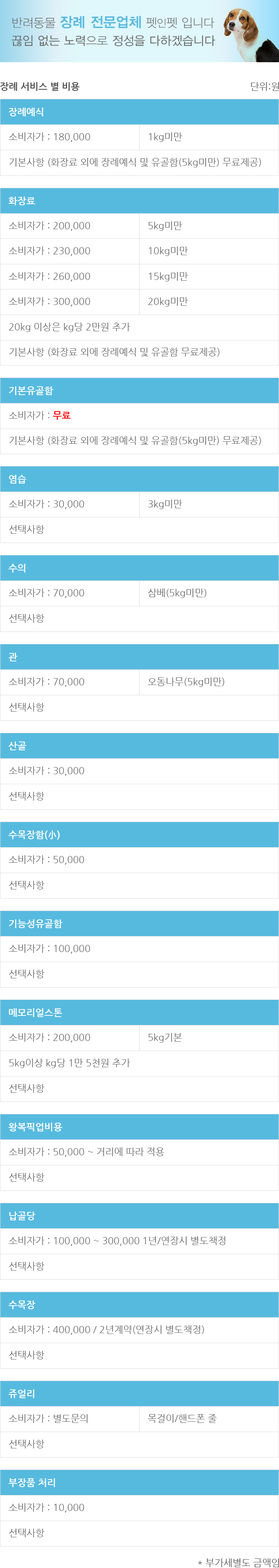
<style>
.page{position:relative;width:279px;height:1568px;background:#ffffff}
.page>*{position:absolute;margin:0}
.t1{font:12px/17.9px "YDVYGO32";color:#666666}
.t2{font:12px/17.9px "YDVYGO31";color:#666666}
.t3{font:14px/17.9px "YDVYGO34";color:#56badf}
.t4{font:10.4px/17.9px "YDVYGO31";color:#666666}
.t5{font:9.6px "NanumGothicBold";color:#4c4c4c}
.t6{font:9.6px "NanumGothic";color:#555555}
.t7{font:9.6px "NanumGothicBold";color:#ffffff}
.t8{font:9.6px "NanumGothic";color:#666666}
.t9{font:9.6px "NanumGothicBold";color:#ff0000}
</style>
<div class="page">
<p class="t1" style="left:12px;top:16px;width:203px;height:30px"><span class="t2">반려동물 </span><span class="t3">장례 전문업체</span><span class="t2"> 펫</span><span class="t4">인</span><span class="t2">펫 입니다<br></span>끊임 없는 노력<span class="t2">으로</span> 정성을 다하겠습니다</p>
<p class="t5" style="left:0px;top:82px;width:80px;height:9px">장례 서비스 별 비용</p>
<p class="t6" style="left:251px;top:82px;width:28px;height:9px">단위:원</p>
<p class="t7" style="left:9px;top:108px;width:34px;height:8px">장례예식</p>
<p class="t8" style="left:9px;top:132px;width:81px;height:10px">소비자가 : 180,000</p>
<p class="t8" style="left:149px;top:132px;width:33px;height:10px">1kg미만</p>
<p class="t8" style="left:9px;top:158px;width:252px;height:9px">기본사항 (화장료 외에 장례예식 및 유골함(5kg미만) 무료제공)</p>
<p class="t7" style="left:8px;top:197px;width:27px;height:8px">화장료</p>
<p class="t8" style="left:9px;top:221px;width:81px;height:10px">소비자가 : 200,000</p>
<p class="t8" style="left:148px;top:221px;width:34px;height:10px">5kg미만</p>
<p class="t8" style="left:9px;top:246px;width:81px;height:10px">소비자가 : 230,000</p>
<p class="t8" style="left:149px;top:246px;width:39px;height:10px">10kg미만</p>
<p class="t8" style="left:9px;top:272px;width:81px;height:9px">소비자가 : 260,000</p>
<p class="t8" style="left:149px;top:272px;width:39px;height:9px">15kg미만</p>
<p class="t8" style="left:9px;top:297px;width:81px;height:10px">소비자가 : 300,000</p>
<p class="t8" style="left:148px;top:297px;width:40px;height:10px">20kg미만</p>
<p class="t8" style="left:9px;top:323px;width:121px;height:9px">20kg 이상은 kg당 2만원 추가</p>
<p class="t8" style="left:9px;top:348px;width:211px;height:9px">기본사항 (화장료 외에 장례예식 및 유골함 무료제공)</p>
<p class="t7" style="left:9px;top:386px;width:44px;height:9px">기본유골함</p>
<p class="t8" style="left:9px;top:411px;width:62px;height:9px">소비자가 : <span class="t9">무료</span></p>
<p class="t8" style="left:9px;top:436px;width:252px;height:10px">기본사항 (화장료 외에 장례예식 및 유골함(5kg미만) 무료제공)</p>
<p class="t7" style="left:9px;top:475px;width:17px;height:9px">염습</p>
<p class="t8" style="left:9px;top:500px;width:75px;height:9px">소비자가 : 30,000</p>
<p class="t8" style="left:148px;top:500px;width:34px;height:9px">3kg미만</p>
<p class="t8" style="left:9px;top:525px;width:36px;height:9px">선택사항</p>
<p class="t7" style="left:8px;top:564px;width:18px;height:9px">수의</p>
<p class="t8" style="left:9px;top:588px;width:75px;height:10px">소비자가 : 70,000</p>
<p class="t8" style="left:148px;top:588px;width:59px;height:10px">삼베(5kg미만)</p>
<p class="t8" style="left:9px;top:614px;width:36px;height:9px">선택사항</p>
<p class="t7" style="left:8px;top:653px;width:10px;height:8px">관</p>
<p class="t8" style="left:9px;top:677px;width:75px;height:10px">소비자가 : 70,000</p>
<p class="t8" style="left:148px;top:677px;width:76px;height:10px">오동나무(5kg미만)</p>
<p class="t8" style="left:9px;top:703px;width:36px;height:9px">선택사항</p>
<p class="t7" style="left:8px;top:742px;width:18px;height:8px">산골</p>
<p class="t8" style="left:9px;top:766px;width:75px;height:10px">소비자가 : 30,000</p>
<p class="t8" style="left:9px;top:792px;width:36px;height:9px">선택사항</p>
<p class="t7" style="left:8px;top:830px;width:52px;height:10px">수목장함(小)</p>
<p class="t8" style="left:9px;top:855px;width:75px;height:10px">소비자가 : 50,000</p>
<p class="t8" style="left:9px;top:881px;width:36px;height:8px">선택사항</p>
<p class="t7" style="left:9px;top:919px;width:54px;height:9px">기능성유골함</p>
<p class="t8" style="left:9px;top:944px;width:81px;height:10px">소비자가 : 100,000</p>
<p class="t8" style="left:9px;top:970px;width:36px;height:8px">선택사항</p>
<p class="t7" style="left:9px;top:1008px;width:53px;height:9px">메모리얼스톤</p>
<p class="t8" style="left:9px;top:1033px;width:81px;height:10px">소비자가 : 200,000</p>
<p class="t8" style="left:148px;top:1033px;width:34px;height:10px">5kg기본</p>
<p class="t8" style="left:9px;top:1058px;width:121px;height:10px">5kg이상 kg당 1만 5천원 추가</p>
<p class="t8" style="left:9px;top:1084px;width:36px;height:9px">선택사항</p>
<p class="t7" style="left:8px;top:1123px;width:55px;height:8px">왕복픽업비용</p>
<p class="t8" style="left:9px;top:1147px;width:155px;height:10px">소비자가 : 50,000 ~ 거리에 따라 적용</p>
<p class="t8" style="left:9px;top:1173px;width:36px;height:9px">선택사항</p>
<p class="t7" style="left:9px;top:1212px;width:26px;height:8px">납골당</p>
<p class="t8" style="left:9px;top:1236px;width:216px;height:10px">소비자가 : 100,000 ~ 300,000 1년/연장시 별도책정</p>
<p class="t8" style="left:9px;top:1262px;width:36px;height:9px">선택사항</p>
<p class="t7" style="left:8px;top:1300px;width:27px;height:9px">수목장</p>
<p class="t8" style="left:9px;top:1325px;width:195px;height:10px">소비자가 : 400,000 / 2년계약(연장시 별도책정)</p>
<p class="t8" style="left:9px;top:1351px;width:36px;height:8px">선택사항</p>
<p class="t7" style="left:8px;top:1389px;width:26px;height:9px">쥬얼리</p>
<p class="t8" style="left:9px;top:1414px;width:79px;height:9px">소비자가 : 별도문의</p>
<p class="t8" style="left:148px;top:1414px;width:69px;height:9px">목걸이/핸드폰 줄</p>
<p class="t8" style="left:9px;top:1440px;width:36px;height:8px">선택사항</p>
<p class="t7" style="left:8px;top:1478px;width:47px;height:9px">부장품 처리</p>
<p class="t8" style="left:9px;top:1503px;width:75px;height:10px">소비자가 : 10,000</p>
<p class="t8" style="left:9px;top:1529px;width:36px;height:8px">선택사항</p>
<p class="t6" style="left:198px;top:1558px;width:81px;height:9px">* 부가세별도 금액임</p>
</div>
